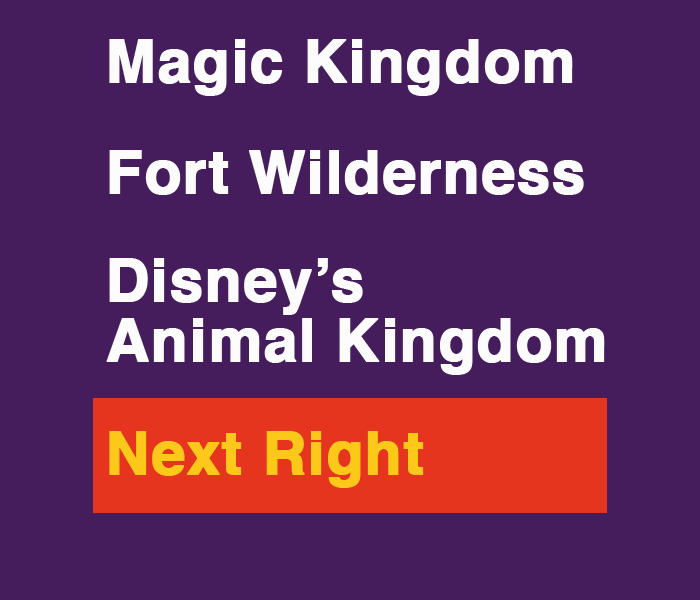
<style>
.page{position:relative;width:700px;height:600px;background:#451d5c}
.page>*{position:absolute;margin:0}
.t1{font:60px "Helvetica-Bold";letter-spacing:0.005em;color:#fcfcfc;font-weight:bold}
.t2{font:60px/60px "Helvetica-Bold";letter-spacing:0.005em;color:#fcfcfc;font-weight:bold}
.t3{font:60px "Helvetica-Bold";letter-spacing:0.005em;color:#fcc91a;font-weight:bold}
</style>
<div class="page">
<p class="t1" style="left:109px;top:39px;width:464px;height:57px">Magic Kingdom</p>
<p class="t1" style="left:109px;top:150px;width:475px;height:45px">Fort Wilderness</p>
<p class="t2" style="left:106px;top:258px;width:499px;height:117px">Disney’s<br>Animal Kingdom</p>
<p class="t3" style="left:109px;top:431px;width:315px;height:57px">Next Right</p>
</div>
